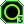
<style>
.page{position:relative;width:24px;height:24px;background:#000000}
.page>*{position:absolute;margin:0}
.t1{font:9px "Montserrat-Bold";color:#000000}
</style>
<div class="page">
<p class="t1" style="left:17px;top:16px;width:6px;height:7px">3</p>
</div>
